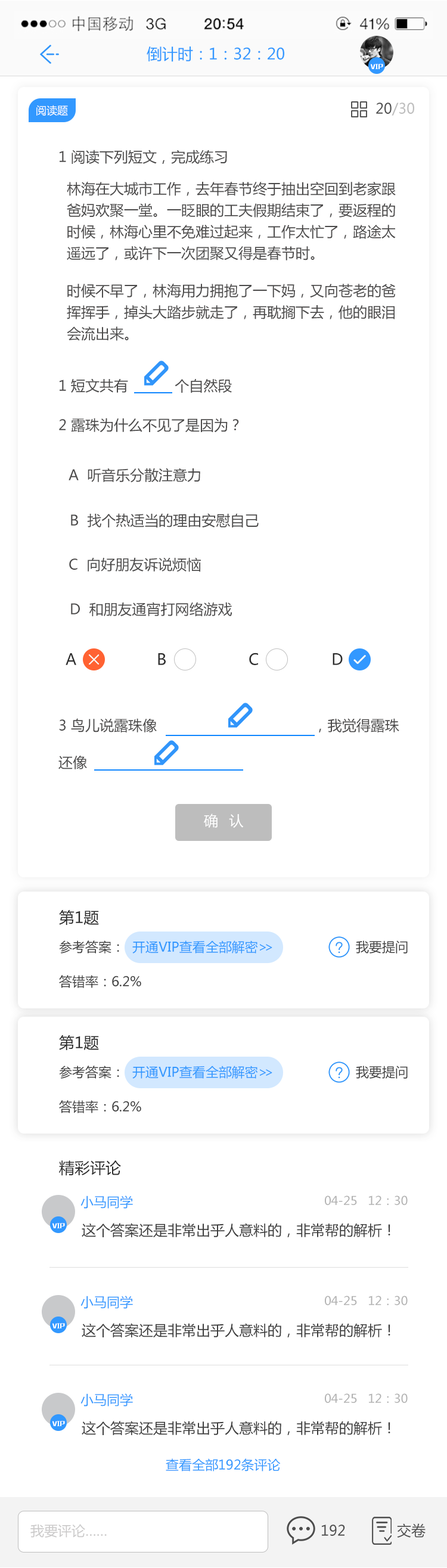
<style>
.page{position:relative;width:447px;height:1568px;background:#ffffff}
.page>*{position:absolute;margin:0}
.t1{font:15.5px "MicrosoftYaHei";color:#3298ff}
.t2{font:5.5px "MFLiHei_Noncommercial-Regular";color:#ffffff}
.t3{font:10.7px "MicrosoftYaHei";color:#ffffff}
.t4{font:14.3px "MicrosoftYaHei";color:#bdbdbd}
.t5{font:14.3px "MicrosoftYaHei";color:#4e4e4e}
.t6{font:14.3px "MicrosoftYaHei";color:#4b4a4a}
.t7{font:14.3px/21.5px "MicrosoftYaHei";color:#4b4a4a}
.t8{font:15.5px "MicrosoftYaHei";color:#2e2e2e}
.t9{font:14.3px/37px "MicrosoftYaHei";color:#4b4a4a}
.t10{font:14.3px "MicrosoftYaHei";letter-spacing:0.24em;color:#ffffff}
.t11{font:15.5px "MicrosoftYaHei";color:#292929}
.t12{font:13.1px "MicrosoftYaHei";color:#3298ff}
.t13{font:13.1px "MicrosoftYaHei";color:#3e3e3e}
.t14{font:13.1px "MicrosoftYaHei";letter-spacing:-0.26em;color:#3298ff}
.t15{font:11.9px "MicrosoftYaHei";color:#b2b2b2}
.t16{font:14.3px "MicrosoftYaHei";color:#3e3e3e}
.t17{font:13.7px "MicrosoftYaHei";color:#cbcaca}
</style>
<div class="page">
<p class="t1" style="left:147px;top:46px;width:137px;height:16px">倒计时：1：32：20</p>
<p class="t2" style="left:370px;top:64px;width:13px;height:5px">VIP</p>
<p class="t3" style="left:36px;top:105px;width:32px;height:11px">阅读题</p>
<p class="t4" style="left:376px;top:103px;width:38px;height:13px"><span class="t5">20</span>/30</p>
<p class="t6" style="left:60px;top:150px;width:167px;height:14px">1 阅读下列短文，完成练习</p>
<p class="t7" style="left:67px;top:182px;width:329px;height:78px">林海在大城市工作，去年春节终于抽出空回到老家跟爸妈欢聚一堂。一眨眼的工夫假期结束了，要返程的时候，林海心里不免难过起来，工作太忙了，路途太遥远了，或许下一次团聚又得是春节时。</p>
<p class="t7" style="left:67px;top:284px;width:329px;height:57px">时候不早了，林海用力拥抱了一下妈，又向苍老的爸挥挥手，掉头大踏步就走了，再耽搁下去，他的眼泪会流出来。</p>
<p class="t6" style="left:60px;top:378px;width:172px;height:15px">1 短文共有           个自然段</p>
<p class="t6" style="left:59px;top:418px;width:180px;height:15px">2 露珠为什么不见了是因为？</p>
<p class="t6" style="left:69px;top:468px;width:131px;height:15px">A  听音乐分散注意力</p>
<p class="t6" style="left:71px;top:513px;width:188px;height:15px">B  找个热适当的理由安慰自己</p>
<p class="t6" style="left:69px;top:557px;width:132px;height:15px">C  向好朋友诉说烦恼</p>
<p class="t6" style="left:71px;top:602px;width:161px;height:14px">D  和朋友通宵打网络游戏</p>
<p class="t8" style="left:66px;top:653px;width:10px;height:12px">A</p>
<p class="t8" style="left:158px;top:653px;width:8px;height:12px">B</p>
<p class="t8" style="left:249px;top:653px;width:9px;height:12px">C</p>
<p class="t8" style="left:333px;top:653px;width:10px;height:12px">D</p>
<p class="t9" style="left:58px;top:718px;width:341px;height:51px">3 鸟儿说露珠像                                     ，我觉得露珠<br>还像</p>
<p class="t10" style="left:204px;top:814px;width:40px;height:14px">确 认</p>
<p class="t11" style="left:59px;top:910px;width:40px;height:16px">第1题</p>
<p class="t12" style="left:59px;top:940px;width:213px;height:14px"><span class="t13">参考答案：  </span>开通VIP查看全部解密<span class="t14">&gt;&gt;</span></p>
<p class="t13" style="left:356px;top:940px;width:52px;height:14px">我要提问</p>
<p class="t13" style="left:59px;top:975px;width:82px;height:13px">答错率：6.2%</p>
<p class="t11" style="left:59px;top:1035px;width:40px;height:16px">第1题</p>
<p class="t12" style="left:59px;top:1066px;width:213px;height:13px"><span class="t13">参考答案：  </span>开通VIP查看全部解密<span class="t14">&gt;&gt;</span></p>
<p class="t13" style="left:356px;top:1066px;width:52px;height:13px">我要提问</p>
<p class="t13" style="left:59px;top:1100px;width:82px;height:13px">答错率：6.2%</p>
<p class="t11" style="left:59px;top:1160px;width:62px;height:16px">精彩评论</p>
<p class="t12" style="left:80px;top:1196px;width:53px;height:13px">小马同学</p>
<p class="t15" style="left:325px;top:1196px;width:83px;height:9px">04-25   12：30</p>
<p class="t2" style="left:52px;top:1223px;width:13px;height:5px">VIP</p>
<p class="t16" style="left:82px;top:1223px;width:308px;height:15px">这个答案还是非常出乎人意料的，非常帮的解析！</p>
<p class="t12" style="left:80px;top:1296px;width:53px;height:13px">小马同学</p>
<p class="t15" style="left:325px;top:1296px;width:83px;height:9px">04-25   12：30</p>
<p class="t2" style="left:52px;top:1323px;width:13px;height:5px">VIP</p>
<p class="t16" style="left:82px;top:1323px;width:308px;height:15px">这个答案还是非常出乎人意料的，非常帮的解析！</p>
<p class="t12" style="left:80px;top:1393px;width:53px;height:13px">小马同学</p>
<p class="t15" style="left:325px;top:1393px;width:83px;height:10px">04-25   12：30</p>
<p class="t2" style="left:52px;top:1421px;width:13px;height:5px">VIP</p>
<p class="t16" style="left:82px;top:1421px;width:308px;height:15px">这个答案还是非常出乎人意料的，非常帮的解析！</p>
<p class="t12" style="left:166px;top:1458px;width:115px;height:13px">查看全部192条评论</p>
<p class="t17" style="left:30px;top:1524px;width:77px;height:14px">我要评论……</p>
<p class="t5" style="left:322px;top:1524px;width:23px;height:12px">192</p>
<p class="t5" style="left:397px;top:1523px;width:29px;height:15px">交卷</p>
</div>
